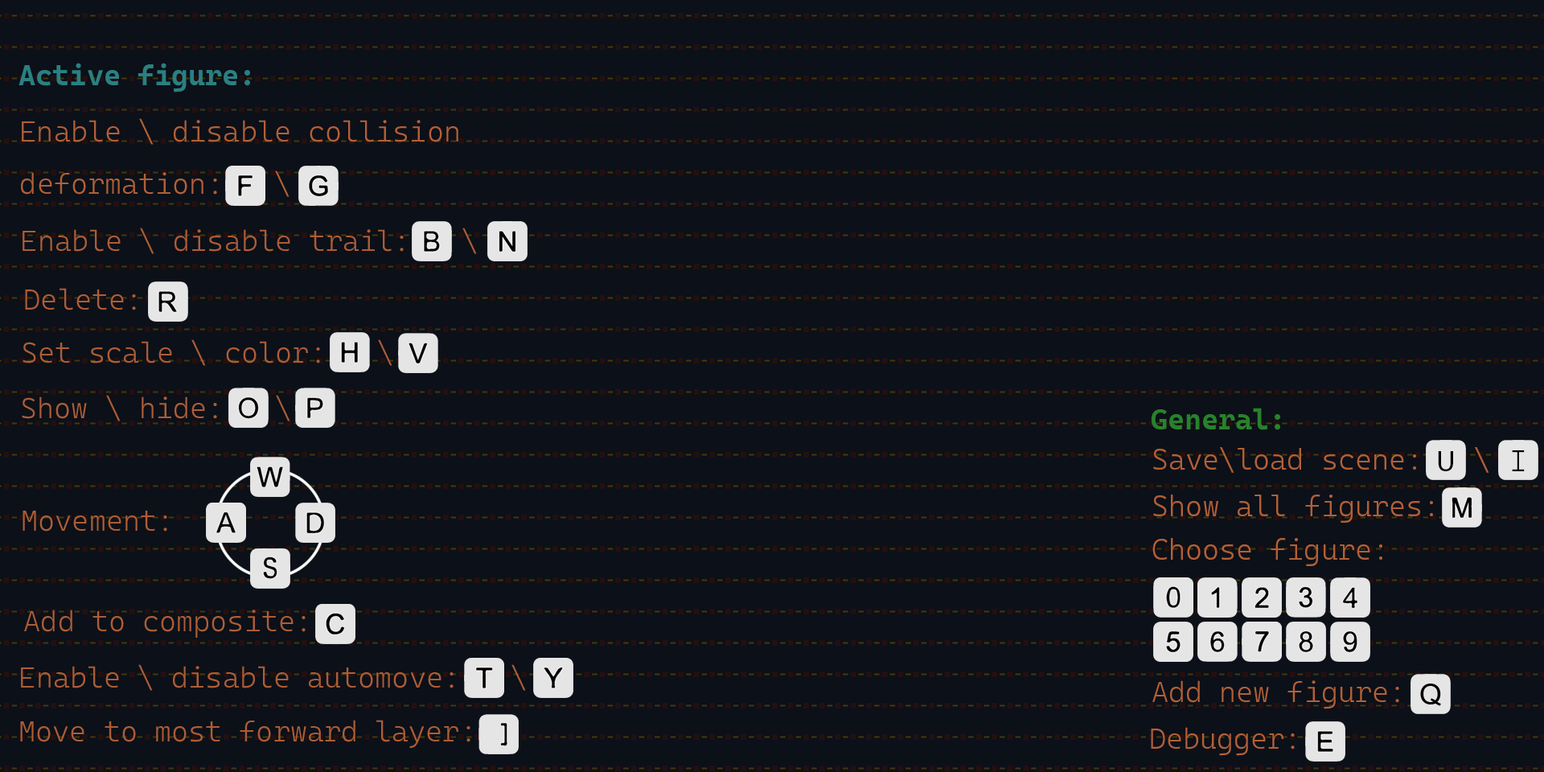
<style>
.page{position:relative;width:1544px;height:772px;background:#0c1018}
.page>*{position:absolute;margin:0}
.t1{font:29px "CascadiaMonoRoman-Bold";color:#2a8081}
.t2{font:29px "CascadiaMonoRoman-Light";color:#b36037}
.t3{font:29px "CascadiaMonoRoman-Light";color:#ad5d36}
.t4{font:29px "CascadiaMonoRoman-Bold";color:#28812d}
.t5{font:29px "CascadiaMono-Light";color:#b36037}
.t6{font:29px "MyriadPro-Regular";color:#000000}
.t7{font:29px "CascadiaMono-Light";color:#000000}
</style>
<div class="page">
<p class="t1" style="left:18px;top:63px;width:232px;height:29px">Active figure:</p>
<p class="t2" style="left:22px;top:118px;width:436px;height:27px">Enable \ disable collision</p>
<p class="t2" style="left:21px;top:171px;width:269px;height:26px">deformation:   \</p>
<p class="t3" style="left:23px;top:228px;width:454px;height:26px">Enable \ disable trail:   \</p>
<p class="t3" style="left:25px;top:288px;width:111px;height:22px">Delete:</p>
<p class="t3" style="left:23px;top:339px;width:370px;height:27px">Set scale \ color:   \</p>
<p class="t3" style="left:22px;top:395px;width:268px;height:26px">Show \ hide:   \</p>
<p class="t4" style="left:1151px;top:408px;width:129px;height:22px">General:</p>
<p class="t5" style="left:1153px;top:447px;width:337px;height:26px">Save\load scene:   \</p>
<p class="t6" style="left:1438px;top:451px;width:15px;height:20px">U</p>
<p class="t7" style="left:1512px;top:450px;width:13px;height:21px">I</p>
<p class="t5" style="left:1153px;top:495px;width:280px;height:28px">Show all figures:</p>
<p class="t3" style="left:23px;top:511px;width:144px;height:21px">Movement:</p>
<p class="t5" style="left:1153px;top:538px;width:230px;height:28px">Choose figure:</p>
<p class="t3" style="left:24px;top:610px;width:282px;height:28px">Add to composite:</p>
<p class="t3" style="left:21px;top:664px;width:505px;height:27px">Enable \ disable automove:   \</p>
<p class="t2" style="left:1153px;top:680px;width:247px;height:29px">Add new figure:</p>
<p class="t3" style="left:20px;top:720px;width:451px;height:29px">Move to most forward layer:</p>
<p class="t2" style="left:1151px;top:727px;width:144px;height:29px">Debugger:</p>
</div>
